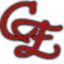
<style>
.page{position:relative;width:64px;height:64px;background:#ffffff}
.page>*{position:absolute;margin:0}
.t1{font:48px "BilboSwashCaps-Regular";color:#aa1111;font-weight:bold}
</style>
<div class="page">
<p class="t1" style="left:1px;top:2px;width:37px;height:38px">C</p>
<p class="t1" style="left:12px;top:20px;width:50px;height:38px">E</p>
</div>
